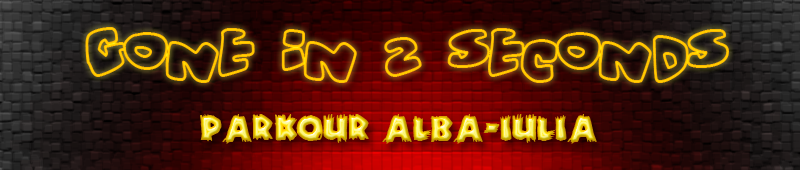
<style>
.page{position:relative;width:800px;height:170px}
.page>*{position:absolute;margin:0}
.t1{font:55.6px "Vitaminoutlined";color:#fec500}
.t2{font:41.7px "ZombieA"}
</style>
<div class="page">
<p class="t1" style="left:85px;top:27px;width:644px;height:56px">Gone In 2 seconds</p>
<p class="t2" style="left:200px;top:114px;width:397px;height:30px">parkour alba-iulia</p>
</div>
